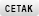
<style>
.page{position:relative;width:39px;height:16px}
.page>*{position:absolute;margin:0}
.t1{font:9.6px "Arial-BoldMT";letter-spacing:0.1em;color:#010101;scale:0.77 1}
</style>
<div class="page">
<p class="t1" style="left:5px;top:5px;width:28px;height:7px">CETAK</p>
</div>
